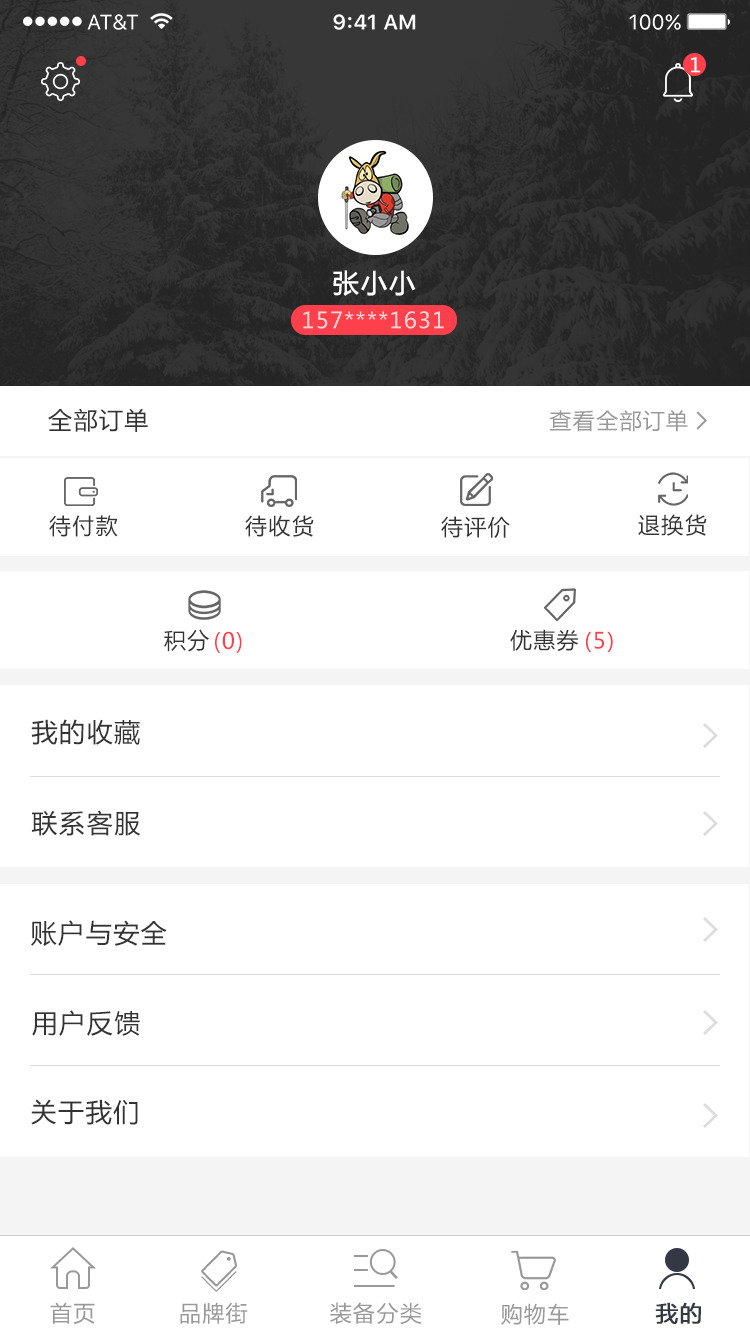
<style>
.page{position:relative;width:750px;height:1334px;background:#ffffff}
.page>*{position:absolute;margin:0}
.t1{font:20px "MicrosoftYaHei";letter-spacing:0.06em;color:#ffffff}
.t2{font:26px "MicrosoftYaHei";letter-spacing:0.06em;color:#ffffff;font-weight:bold}
.t3{font:22px "MicrosoftYaHei";letter-spacing:0.06em;color:#ffd2d4}
.t4{font:24px "MicrosoftYaHei";letter-spacing:0.06em;color:#333333}
.t5{font:22px "MicrosoftYaHei";letter-spacing:0.06em;color:#999999}
.t6{font:22px "MicrosoftYaHei";letter-spacing:0.06em;color:#333333}
.t7{font:22.4px "MicrosoftYaHei";letter-spacing:0.06em;color:#333333}
.t8{font:22.4px "MicrosoftYaHei";letter-spacing:0.06em;color:#fe404c}
.t9{font:22px "MicrosoftYaHei";letter-spacing:0.06em;color:#fe404c}
.t10{font:26px "MicrosoftYaHei";letter-spacing:0.06em;color:#333333}
.t11{font:22px "MicrosoftYaHei";letter-spacing:0.06em;color:#343843;font-weight:bold}
</style>
<div class="page">
<p class="t1" style="left:691px;top:57px;width:9px;height:16px">1</p>
<p class="t2" style="left:333px;top:270px;width:83px;height:26px">张小小</p>
<p class="t3" style="left:303px;top:311px;width:141px;height:18px">157****1631</p>
<p class="t4" style="left:48px;top:408px;width:100px;height:24px">全部订单</p>
<p class="t5" style="left:549px;top:410px;width:139px;height:22px">查看全部订单</p>
<p class="t6" style="left:49px;top:515px;width:69px;height:22px">待付款</p>
<p class="t6" style="left:245px;top:515px;width:69px;height:22px">待收货</p>
<p class="t6" style="left:441px;top:516px;width:69px;height:22px">待评价</p>
<p class="t6" style="left:638px;top:514px;width:69px;height:22px">退换货</p>
<p class="t7" style="left:164px;top:629px;width:45px;height:23px">积分</p>
<p class="t6" style="left:510px;top:629px;width:68px;height:22px">优惠券</p>
<p class="t8" style="left:215px;top:631px;width:27px;height:22px">(0)</p>
<p class="t9" style="left:586px;top:631px;width:27px;height:22px">(5)</p>
<p class="t10" style="left:31px;top:719px;width:109px;height:26px">我的收藏</p>
<p class="t10" style="left:31px;top:810px;width:110px;height:26px">联系客服</p>
<p class="t10" style="left:31px;top:920px;width:136px;height:26px">账户与安全</p>
<p class="t10" style="left:32px;top:1010px;width:108px;height:26px">用户反馈</p>
<p class="t10" style="left:31px;top:1099px;width:107px;height:26px">关于我们</p>
<p class="t5" style="left:50px;top:1302px;width:45px;height:22px">首页</p>
<p class="t5" style="left:180px;top:1302px;width:68px;height:22px">品牌街</p>
<p class="t5" style="left:330px;top:1302px;width:92px;height:22px">装备分类</p>
<p class="t11" style="left:655px;top:1302px;width:46px;height:22px">我的</p>
<p class="t5" style="left:501px;top:1303px;width:68px;height:22px">购物车</p>
</div>
